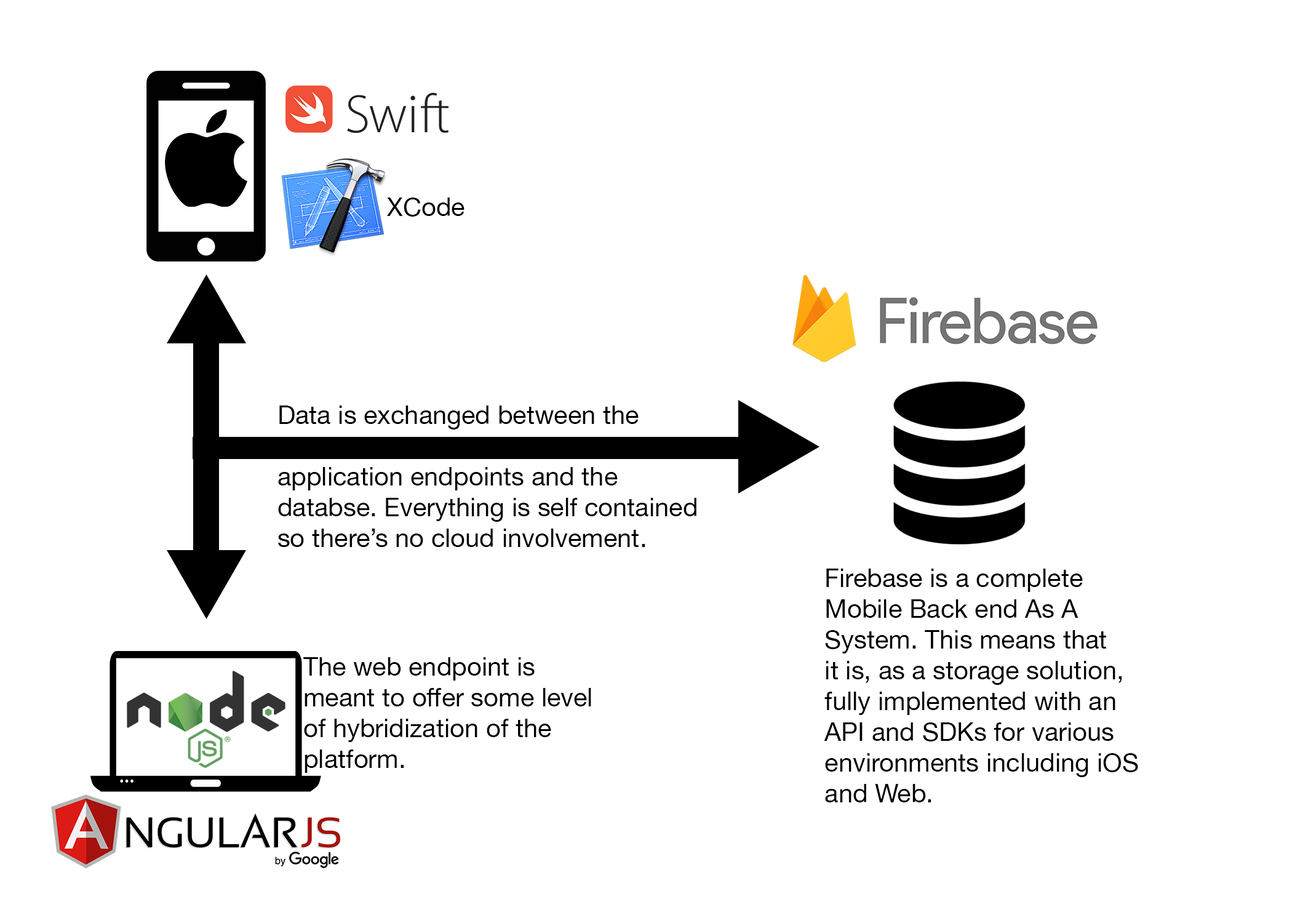
<style>
.page{position:relative;width:1292px;height:923px;background:#ffffff}
.page>*{position:absolute;margin:0}
.t1{font:25.6px "HelveticaNeue";color:#000000}
</style>
<div class="page">
<p class="t1" style="left:387px;top:197px;width:78px;height:20px">XCode</p>
<p class="t1" style="left:278px;top:405px;width:418px;height:142px">Data is exchanged between the<br><br>application endpoints and the <br>databse. Everything is self contained<br>so there’s no cloud involvement.</p>
<p class="t1" style="left:824px;top:569px;width:314px;height:233px">Firebase is a complete<br>Mobile Back end As A <br>System. This means that <br>it is, as a storage solution, <br>fully implemented with an <br>API and SDKs for various <br>environments including iOS<br>and Web.</p>
<p class="t1" style="left:303px;top:657px;width:288px;height:116px">The web endpoint is<br>meant to offer some level<br>of hybridization of the <br>platform.</p>
</div>
